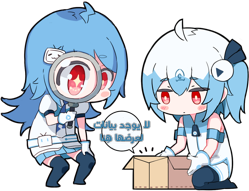
<style>
.page{position:relative;width:249px;height:191px;background:#ffffff}
.page>*{position:absolute;margin:0}
.t1{font:11px "CoconNextArabic-Regular";color:#357ea7}
</style>
<div class="page">
<p class="t1" style="left:93px;top:121px;width:57px;height:23px;text-align:center">لا يوجد بيانات لعرضها هُنا</p>
</div>
